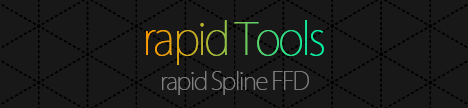
<style>
.page{position:relative;width:468px;height:108px;background:#181818}
.page>*{position:absolute;margin:0}
.t1{font:44.1px "KozGoPr6N-ExtraLight";letter-spacing:-0.06em}
.t2{font:24.1px "KozGoPr6N-ExtraLight";letter-spacing:-0.06em;color:#7f7f7f}
</style>
<div class="page">
<p class="t1" style="left:146px;top:20px;width:178px;height:45px">rapid Tools</p>
<p class="t2" style="left:161px;top:71px;width:148px;height:24px">rapid Spline FFD</p>
</div>
